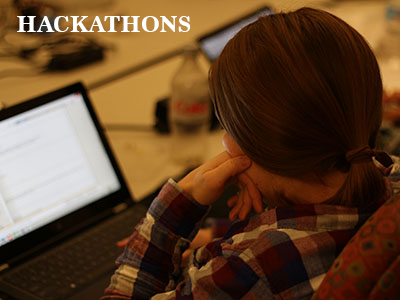
<style>
.page{position:relative;width:400px;height:300px}
.page>*{position:absolute;margin:0}
.t1{font:24px "Marion-Bold";color:#ffffff}
</style>
<div class="page">
<p class="t1" style="left:17px;top:16px;width:174px;height:16px">HACKATHONS</p>
</div>
